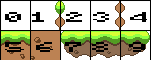
<style>
.page{position:relative;width:151px;height:60px;background:#ffffff}
.page>*{position:absolute;margin:0}
.t1{font:12.5px "Minecraft";color:#000000;scale:2.46 1}
</style>
<div class="page">
<p class="t1" style="left:5px;top:12px;width:142px;height:40px">0 1  2 3  4<br>5 6 7 8  9</p>
</div>
